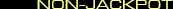
<style>
.page{position:relative;width:173px;height:9px;background:#000000}
.page>*{position:absolute;margin:0}
.t1{font:14px "MicrogrammaD-MediExte";letter-spacing:0.075em;color:#f5ff8d;text-transform:uppercase}
</style>
<div class="page">
<p class="t1" style="left:37px;top:0px;width:136px;height:9px">NON-jackpot</p>
</div>
